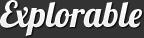
<style>
.page{position:relative;width:144px;height:38px;background:#333333}
.page>*{position:absolute;margin:0}
.t1{font:36px "Lobster1.4";color:#ffffff}
</style>
<div class="page">
<p class="t1" style="left:0px;top:0px;width:142px;height:36px">Explorable</p>
</div>
